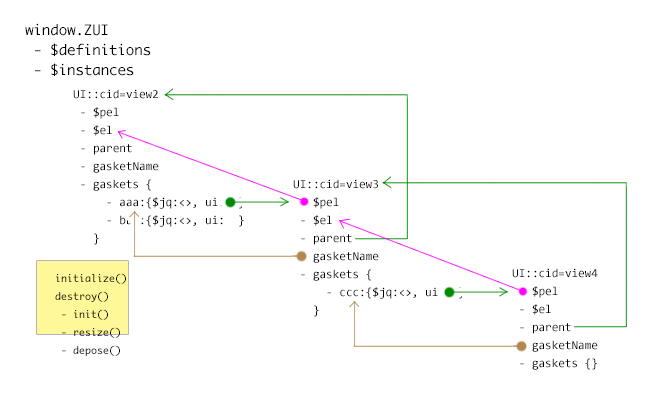
<style>
.page{position:relative;width:659px;height:402px;background:#ffffff}
.page>*{position:absolute;margin:0}
.t1{font:14px/20px "Monaco";color:#000000}
.t2{font:12px/18px "Consolas";color:#000000}
.t3{font:10px/18px "Monaco";color:#000000}
</style>
<div class="page">
<p class="t1" style="left:25px;top:23px;width:126px;height:53px">window.ZUI<br> - $definitions<br> - $instances</p>
<p class="t2" style="left:73px;top:89px;width:171px;height:156px">UI::cid=view2<br> - $pel<br> - $el<br> - parent<br> - gasketName<br> - gaskets {<br>     - aaa:{$jq:&lt;&gt;, ui:  }<br>     - bbb:{$jq:&lt;&gt;, ui:  }<br>   }</p>
<p class="t2" style="left:293px;top:179px;width:171px;height:138px">UI::cid=view3<br> - $pel<br> - $el<br> - parent<br> - gasketName<br> - gaskets {<br>     - ccc:{$jq:&lt;&gt;, ui:  }<br>   }</p>
<p class="t2" style="left:512px;top:268px;width:86px;height:102px">UI::cid=view4<br> - $pel<br> - $el<br> - parent<br> - gasketName<br> - gaskets {}</p>
<p class="t3" style="left:55px;top:273px;width:71px;height:83px">initialize()<br>destroy()<br> - init()<br> - resize()<br> - depose()</p>
</div>
